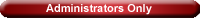
<style>
.page{position:relative;width:200px;height:18px}
.page>*{position:absolute;margin:0}
.t1{font:11px "Arial-BoldMT";color:#ffffff}
</style>
<div class="page">
<p class="t1" style="left:46px;top:4px;width:106px;height:11px">Administrators Only</p>
</div>
